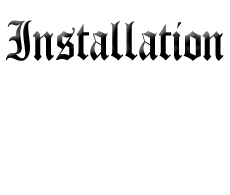
<style>
.page{position:relative;width:230px;height:195px;background:#ffffff}
.page>*{position:absolute;margin:0}
.t1{font:60px "Oldchristmas-Regular";color:#000000;scale:0.9 1}
</style>
<div class="page">
<p class="t1" style="left:6px;top:20px;width:218px;height:41px">Installation</p>
</div>
